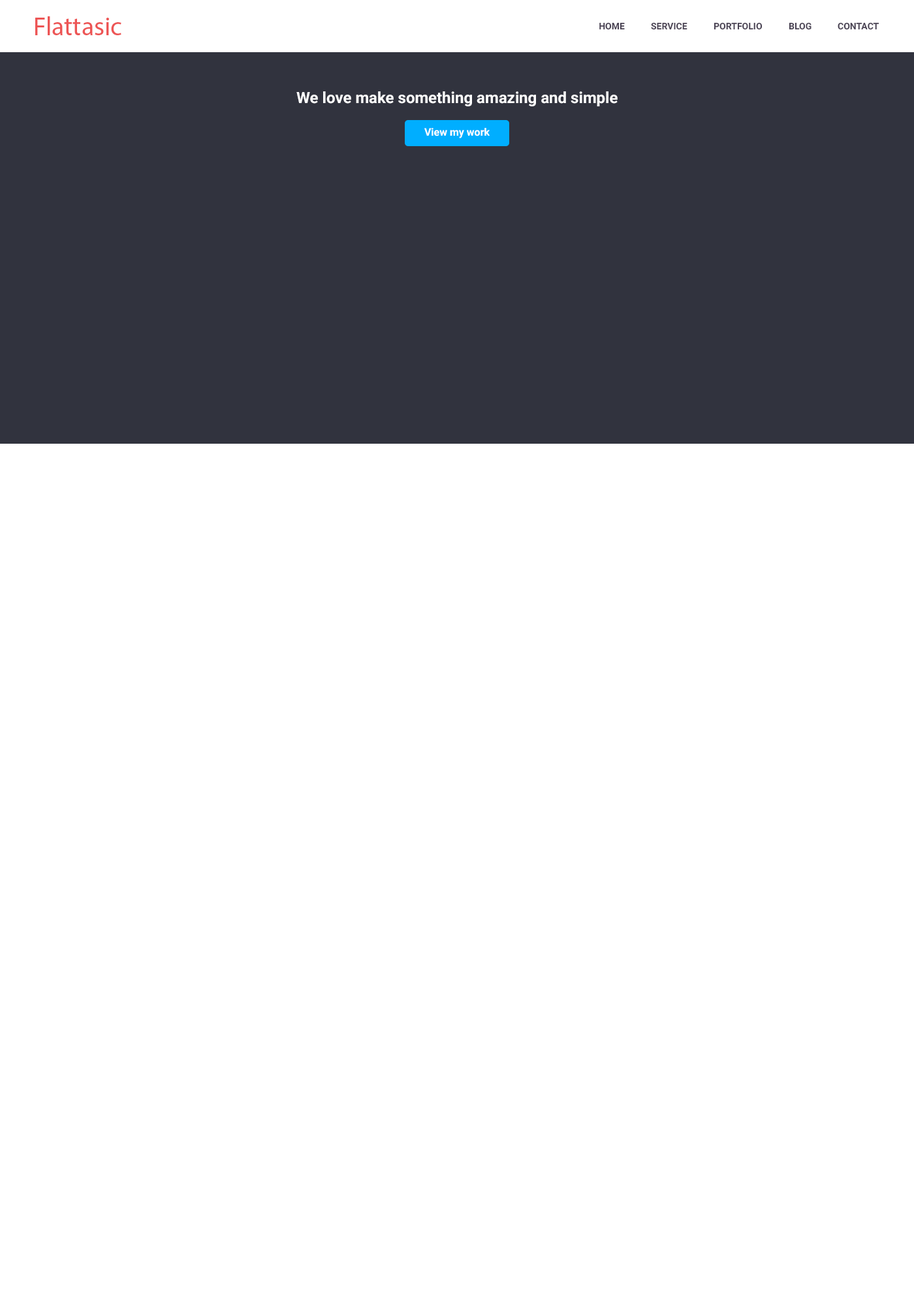
<style>
.page{position:relative;width:914px;height:1305px;background:#ffffff}
.page>*{position:absolute;margin:0}
.t1{font:26.1px "MyriadPro-Regular";color:#ed5555}
.t2{font:9.1px "Roboto-Bold";color:#4a4354}
.t3{font:15.7px "Roboto-Bold";color:#ffffff}
.t4{font:10.4px "Roboto-Bold";color:#ffffff}
</style>
<div class="page">
<p class="t1" style="left:35px;top:16px;width:86px;height:19px">Flattasic</p>
<p class="t2" style="left:599px;top:22px;width:26px;height:8px">HOME</p>
<p class="t2" style="left:651px;top:22px;width:36px;height:8px">SERVICE</p>
<p class="t2" style="left:713px;top:22px;width:49px;height:8px">PORTFOLIO</p>
<p class="t2" style="left:788px;top:22px;width:23px;height:8px">BLOG</p>
<p class="t2" style="left:837px;top:22px;width:42px;height:8px">CONTACT</p>
<p class="t3" style="left:296px;top:91px;width:321px;height:15px">We love make something amazing and simple</p>
<p class="t4" style="left:424px;top:128px;width:65px;height:10px">View my work</p>
</div>
